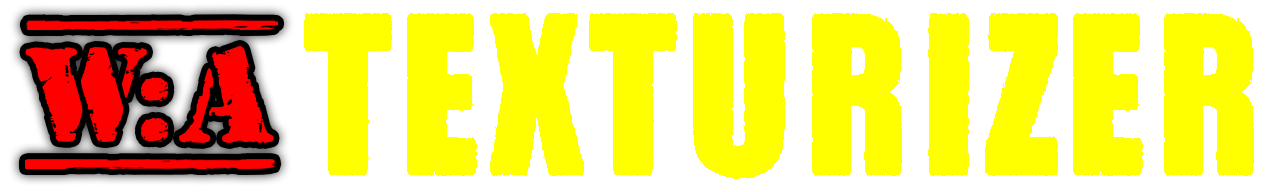
<style>
.page{position:relative;width:1270px;height:192px;background:#ffff00}
.page>*{position:absolute;margin:0}
.t1{font:227.3px "BARBEDWIREPERSONALUSE-Bold";letter-spacing:0.02em;color:#ffff00}
</style>
<div class="page">
<p class="t1" style="left:304px;top:13px;width:950px;height:166px">texturizer</p>
</div>
